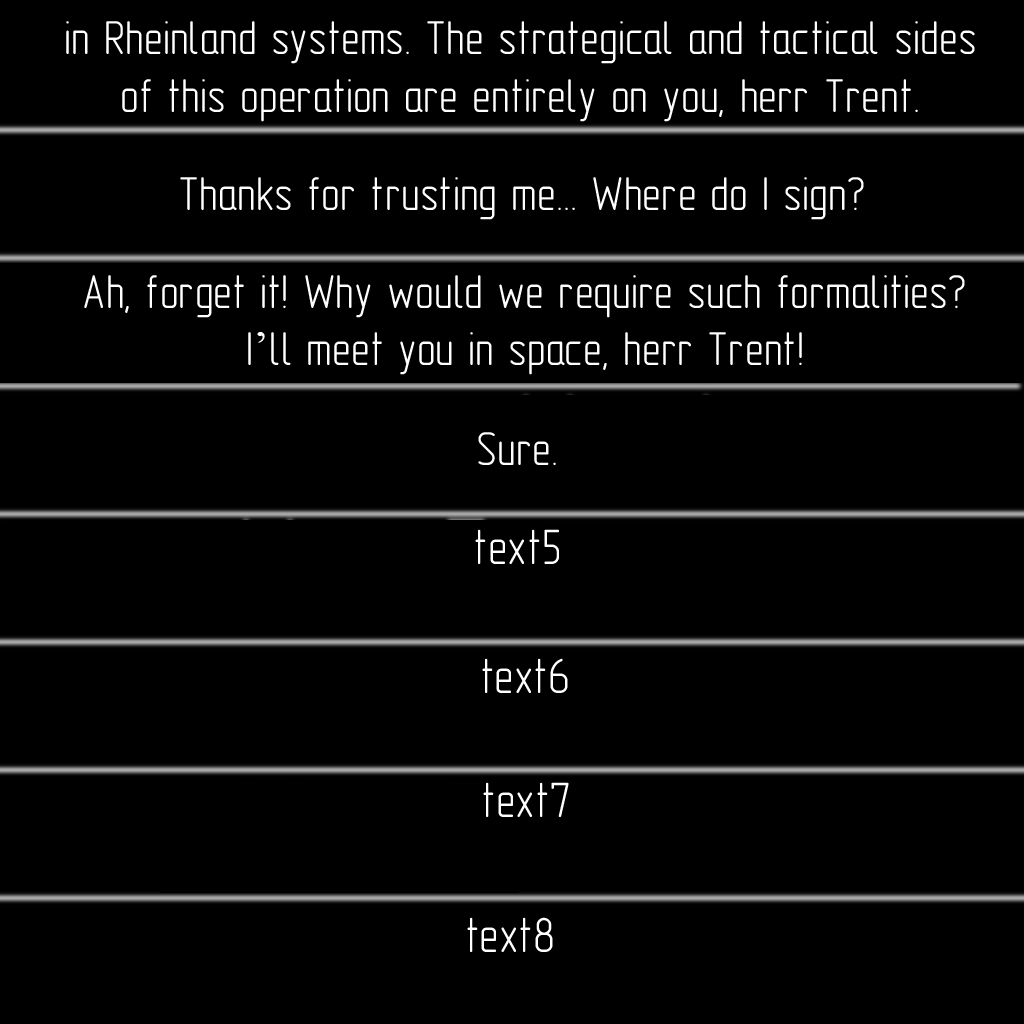
<style>
.page{position:relative;width:1024px;height:1024px;background:#000000}
.page>*{position:absolute;margin:0}
.t1{font:48px "GOST-2.304-81typeA";color:#ffffff}
.t2{font:48px "TimesNewRomanPSMT";color:#ffffff}
.t3{font:50px "GOST-2.304-81typeA";color:#ffffff}
</style>
<div class="page">
<p class="t1" style="left:66px;top:21px;width:909px;height:101px;text-align:center">in Rheinland systems. The strategical and tactical sides<br>of this operation are entirely on you, herr Trent.</p>
<p class="t1" style="left:180px;top:177px;width:684px;height:43px">Thanks for trusting me... Where do I sign?</p>
<p class="t1" style="left:84px;top:275px;width:881px;height:100px;text-align:center">Ah, forget it! Why would we require such formalities?<br>I<span class="t2">’</span>ll meet you in space, herr Trent!</p>
<p class="t1" style="left:478px;top:432px;width:78px;height:33px">Sure.</p>
<p class="t3" style="left:475px;top:529px;width:84px;height:35px">text5</p>
<p class="t3" style="left:482px;top:658px;width:86px;height:35px">text6</p>
<p class="t3" style="left:483px;top:782px;width:86px;height:35px">text7</p>
<p class="t3" style="left:467px;top:917px;width:86px;height:35px">text8</p>
</div>
